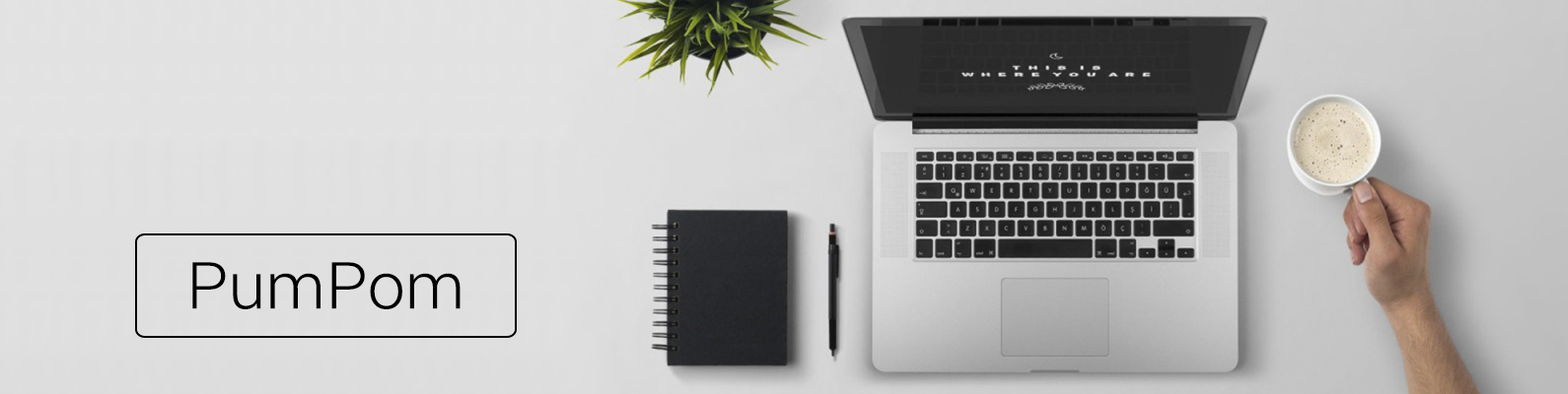
<style>
.page{position:relative;width:1568px;height:394px}
.page>*{position:absolute;margin:0}
.t1{font:64.9px "Roboto-Light";color:#000000;scale:1.04 1}
</style>
<div class="page">
<p class="t1" style="left:192px;top:262px;width:269px;height:48px">PumPom</p>
</div>
